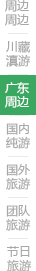
<style>
.page{position:relative;width:36px;height:271px;background:#ffffff}
.page>*{position:absolute;margin:0}
.t1{font:12px/14px "MicrosoftYaHei";color:#a8a8a8}
.t2{font:12px/14px "MicrosoftYaHei";color:#ffffff}
</style>
<div class="page">
<p class="t1" style="left:5px;top:0px;width:24px;height:26px;text-align:center">周边<br>周边</p>
<p class="t1" style="left:6px;top:40px;width:25px;height:27px">川藏<br>滇游</p>
<p class="t2" style="left:5px;top:82px;width:24px;height:26px;text-align:center">广东<br>周边</p>
<p class="t1" style="left:5px;top:123px;width:26px;height:26px;text-align:center">国内<br>纯游</p>
<p class="t1" style="left:6px;top:164px;width:25px;height:26px;text-align:center">国外<br>旅游</p>
<p class="t1" style="left:6px;top:205px;width:25px;height:26px;text-align:center">团队<br>旅游</p>
<p class="t1" style="left:7px;top:246px;width:25px;height:26px;text-align:center">节日<br>旅游</p>
</div>
